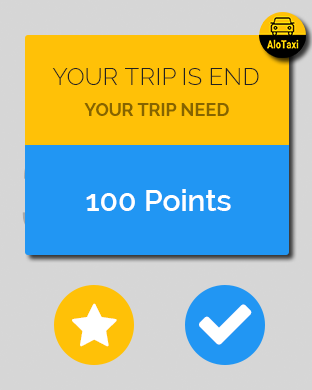
<style>
.page{position:relative;width:312px;height:390px;background:#d6d6d6}
.page>*{position:absolute;margin:0}
.t1{font:24px "Raleway-Light";color:#212121;text-transform:uppercase}
.t2{font:18px "Raleway-Bold";color:#856400;text-transform:uppercase}
.t3{font:30px "Raleway-SemiBold";color:#ffffff}
</style>
<div class="page">
<p class="t1" style="left:52px;top:68px;width:207px;height:17px">Your trip is end</p>
<p class="t2" style="left:84px;top:103px;width:145px;height:13px">Your trip need</p>
<p class="t3" style="left:86px;top:189px;width:145px;height:22px">100 Points</p>
</div>
